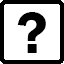
<style>
.page{position:relative;width:64px;height:64px;background:#ffffff}
.page>*{position:absolute;margin:0}
.t1{font:60px "FranklinGothic-Demi";color:#000000}
</style>
<div class="page">
<p class="t1" style="left:17px;top:12px;width:29px;height:41px">?</p>
</div>
